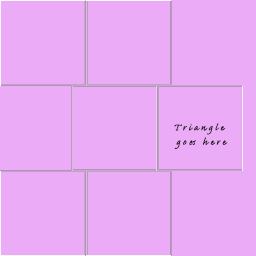
<style>
.page{position:relative;width:256px;height:256px;background:#ecabf7}
.page>*{position:absolute;margin:0}
.t1{font:12px "CaflischScriptPro-Regular";letter-spacing:0.205em;color:#181716}
</style>
<div class="page">
<p class="t1" style="left:174px;top:123px;width:54px;height:26px;text-align:center">Triangle<br> goes here</p>
</div>
